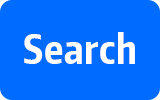
<style>
.page{position:relative;width:160px;height:100px;background:#006cff}
.page>*{position:absolute;margin:0}
.t1{font:40px "EncodeSansCompressed-Bold";letter-spacing:0.015em;color:#ffffff}
</style>
<div class="page">
<p class="t1" style="left:24px;top:32px;width:111px;height:32px">Search</p>
</div>
